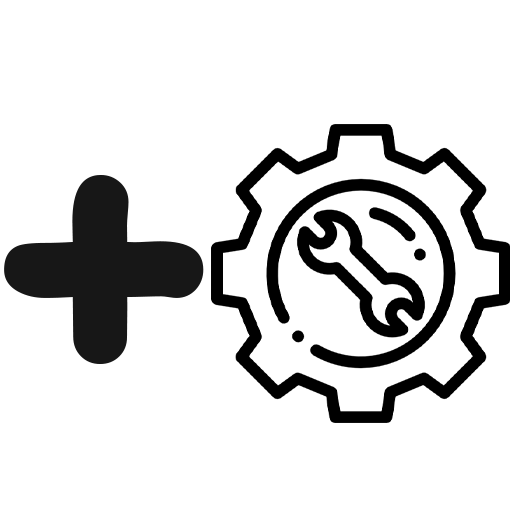
<style>
.page{position:relative;width:512px;height:512px;background:#ffffff}
.page>*{position:absolute;margin:0}
.t1{font:475px "ComicSansMS-Bold";color:#171717;scale:0.91 1}
</style>
<div class="page">
<p class="t1" style="left:4px;top:175px;width:200px;height:189px">+</p>
</div>
